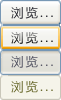
<style>
.page{position:relative;width:61px;height:100px}
.page>*{position:absolute;margin:0}
.t1{font:12px "MicrosoftYaHei";letter-spacing:0.18em;color:#2e2f36}
.t2{font:12px "MicrosoftYaHei";letter-spacing:0.18em}
.t3{font:12px "MicrosoftYaHei";letter-spacing:0.18em;color:#565765}
.t4{font:12px "MicrosoftYaHei";letter-spacing:0.18em;color:#6c6c31}
</style>
<div class="page">
<p class="t1" style="left:11px;top:7px;width:42px;height:12px">浏览...</p>
<p class="t2" style="left:11px;top:32px;width:42px;height:12px">浏览...</p>
<p class="t3" style="left:11px;top:56px;width:42px;height:12px">浏览...</p>
<p class="t4" style="left:11px;top:81px;width:42px;height:12px">浏览...</p>
</div>
